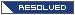
<style>
.page{position:relative;width:75px;height:15px;background:#1c3d7d}
.page>*{position:absolute;margin:0}
.t1{font:8px "BitDustTwo";color:#ffffff}
</style>
<div class="page">
<p class="t1" style="left:19px;top:5px;width:47px;height:5px">RESOLVED</p>
</div>
